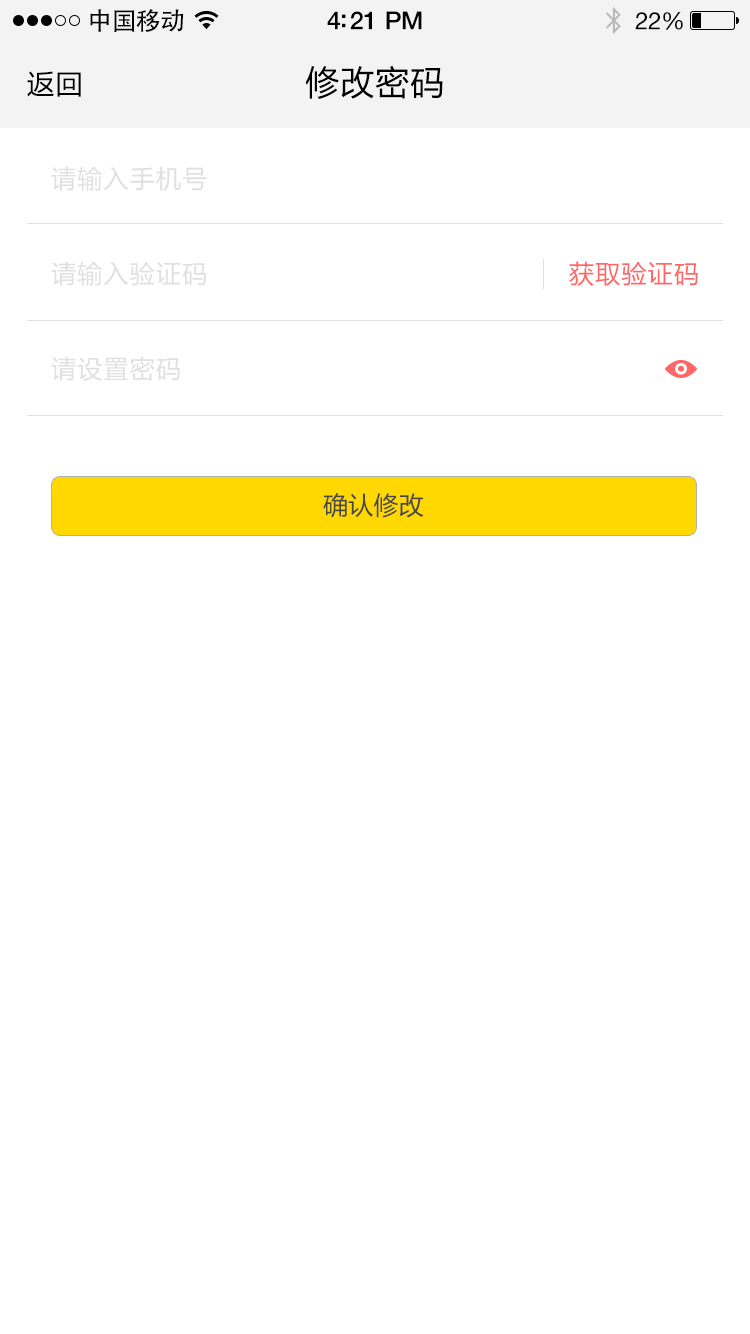
<style>
.page{position:relative;width:750px;height:1334px;background:#ffffff}
.page>*{position:absolute;margin:0}
.t1{font:25px "AdobeHeitiStd-Regular";letter-spacing:-0.025em;color:#000000}
.t2{font:25px "HelveticaNeue-Medium";letter-spacing:-0.02em;color:#000000}
.t3{font:24px "HelveticaNeue";letter-spacing:-0.02em;color:#000000}
.t4{font:34px "MicrosoftYaHei";letter-spacing:0.03em;color:#000000}
.t5{font:27px "MicrosoftYaHei";letter-spacing:0.05em;color:#000000}
.t6{font:25px "MicrosoftYaHei";letter-spacing:0.05em;color:#e0e0e0}
.t7{font:25px "MicrosoftYaHei";letter-spacing:0.05em;color:#ff6666}
.t8{font:25px "MicrosoftYaHei";letter-spacing:0.01em;color:#555555}
</style>
<div class="page">
<p class="t1" style="left:90px;top:9px;width:94px;height:23px">中国移动</p>
<p class="t2" style="left:327px;top:11px;width:95px;height:19px">4:21 PM</p>
<p class="t3" style="left:635px;top:12px;width:48px;height:18px">22%</p>
<p class="t4" style="left:305px;top:65px;width:138px;height:34px">修改密码</p>
<p class="t5" style="left:27px;top:71px;width:54px;height:26px">返回</p>
<p class="t6" style="left:51px;top:166px;width:156px;height:25px">请输入手机号</p>
<p class="t6" style="left:51px;top:261px;width:155px;height:25px">请输入验证码</p>
<p class="t7" style="left:569px;top:261px;width:129px;height:25px">获取验证码</p>
<p class="t6" style="left:51px;top:356px;width:129px;height:25px">请设置密码</p>
<p class="t8" style="left:323px;top:493px;width:101px;height:25px">确认修改</p>
</div>
